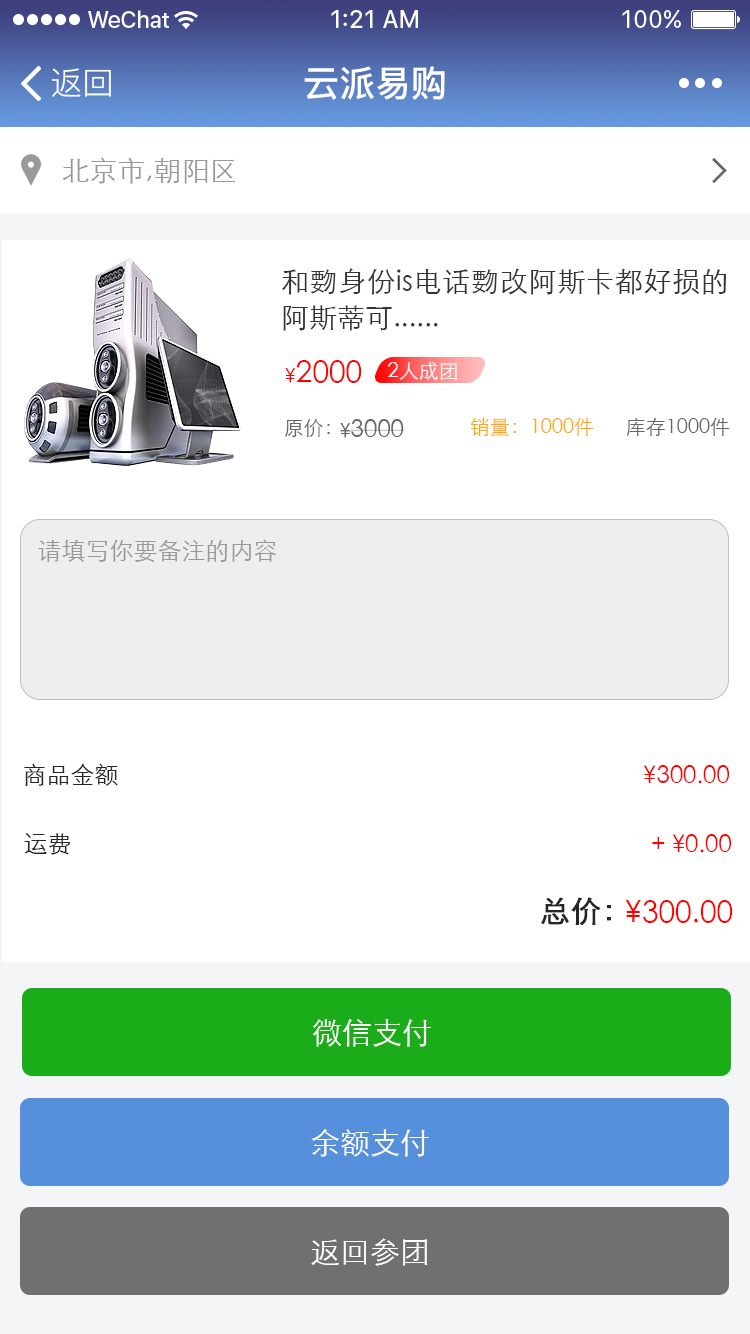
<style>
.page{position:relative;width:750px;height:1334px;background:#ffffff}
.page>*{position:absolute;margin:0}
.t1{font:32px "PingFang-SC-Regular";color:#ffffff}
.t2{font:36px "PingFang-SC-Bold";color:#ffffff}
.t3{font:28px "STXihei";color:#999999}
.t4{font:28px/36px "STXihei";color:#333333}
.t5{font:30px "STXihei";color:#ff0000}
.t6{font:20px "STXihei";color:#ff0000}
.t7{font:20px "STXihei";color:#ffffff}
.t8{font:20px "STXihei";color:#666666}
.t9{font:24px "STXihei";color:#666666}
.t10{font:20px "STXihei";color:#ffa800}
.t11{font:24px "STXihei";color:#999999}
.t12{font:24px "STXihei";color:#262626}
.t13{font:24px "STXihei";color:#ff0000}
.t14{font:30px "STXihei";color:#262626;font-weight:bold}
.t15{font:30px "STXihei";color:#ffffff}
</style>
<div class="page">
<p class="t1" style="left:52px;top:68px;width:59px;height:29px">返回</p>
<p class="t2" style="left:304px;top:66px;width:141px;height:34px">云派易购</p>
<p class="t3" style="left:62px;top:157px;width:173px;height:27px">北京市,朝阳区</p>
<p class="t4" style="left:282px;top:268px;width:445px;height:63px;text-align:justify">和覅身份is电话覅改阿斯卡都好损的阿斯蒂可......</p>
<p class="t5" style="left:285px;top:360px;width:77px;height:23px"><span class="t6">¥</span>2000</p>
<p class="t7" style="left:388px;top:362px;width:69px;height:18px">2人成团</p>
<p class="t8" style="left:284px;top:419px;width:46px;height:19px">原价：</p>
<p class="t9" style="left:339px;top:419px;width:65px;height:19px"><span class="t8">¥</span>3000</p>
<p class="t10" style="left:470px;top:417px;width:124px;height:19px">销量：1000件</p>
<p class="t8" style="left:626px;top:417px;width:104px;height:19px">库存1000件</p>
<p class="t11" style="left:38px;top:539px;width:238px;height:23px">请填写你要备注的内容</p>
<p class="t12" style="left:24px;top:763px;width:94px;height:23px">商品金额</p>
<p class="t13" style="left:643px;top:765px;width:87px;height:19px">¥300.00</p>
<p class="t12" style="left:24px;top:833px;width:46px;height:22px">运费</p>
<p class="t13" style="left:652px;top:834px;width:80px;height:19px">+ ¥0.00</p>
<p class="t14" style="left:541px;top:897px;width:70px;height:28px">总价：</p>
<p class="t5" style="left:625px;top:900px;width:108px;height:23px">¥300.00</p>
<p class="t15" style="left:312px;top:1019px;width:119px;height:28px">微信支付</p>
<p class="t15" style="left:311px;top:1129px;width:118px;height:28px">余额支付</p>
<p class="t15" style="left:311px;top:1238px;width:117px;height:28px">返回参团</p>
</div>
